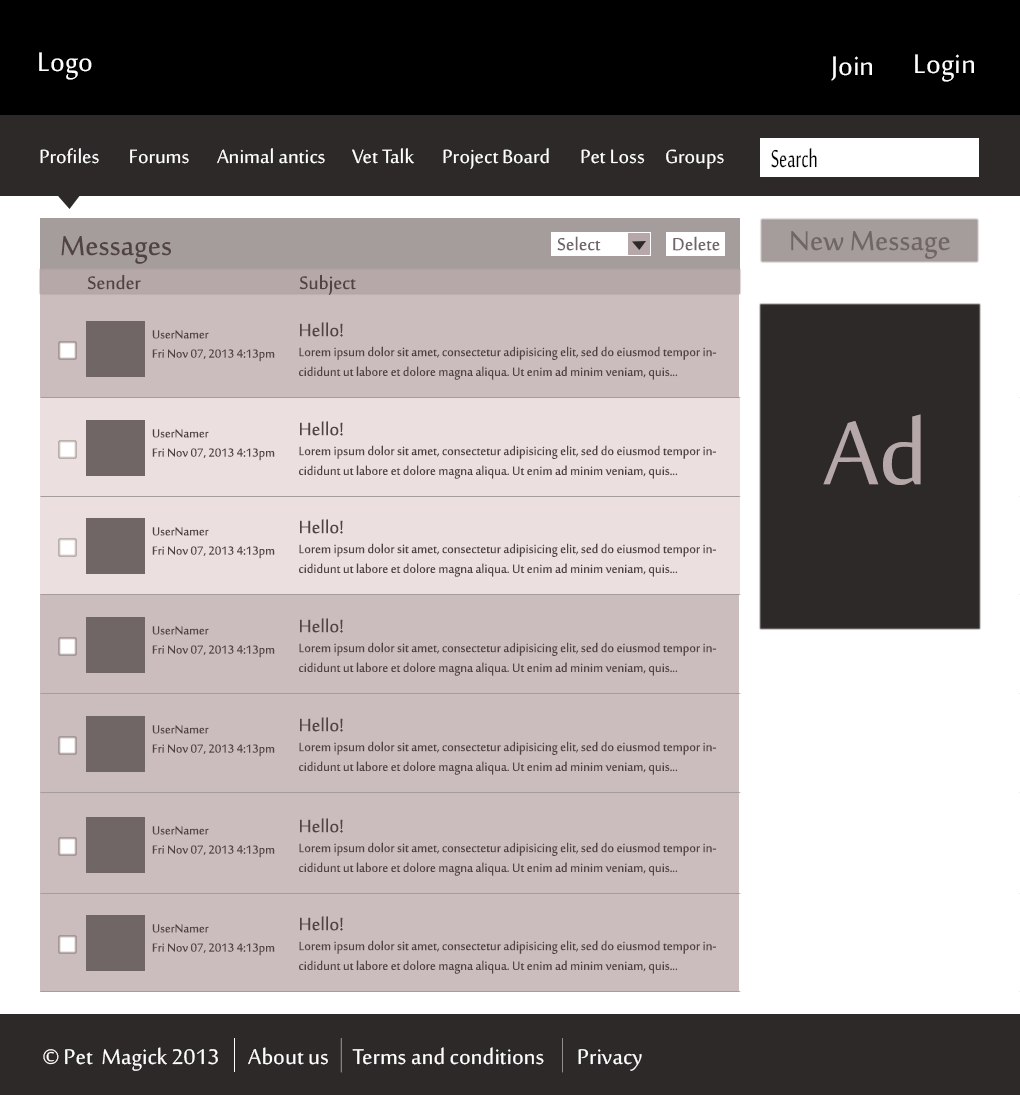
<style>
.page{position:relative;width:1020px;height:1095px;background:#cbbdbd}
.page>*{position:absolute;margin:0}
.t1{font:36.8px "SakkalMajalla";color:#ffffff}
.t2{font:26.2px "SakkalMajalla";color:#ffffff}
.t3{font:33.9px "SakkalMajalla";color:#000000;scale:0.67 1}
.t4{font:37.5px "SakkalMajalla";color:#706666}
.t5{font:37.5px "SakkalMajalla";color:#504342}
.t6{font:24px "SakkalMajalla";color:#706666}
.t7{font:25px "SakkalMajalla";color:#504342}
.t8{font:16.5px "SakkalMajalla";color:#504342}
.t9{font:24.5px "SakkalMajalla";color:#504342}
.t10{font:16px "SakkalMajalla";color:#504342}
.t11{font:123.2px "SakkalMajalla";color:#b6a8a8}
.t12{font:29.3px "SakkalMajalla";color:#ffffff}
</style>
<div class="page">
<p class="t1" style="left:39px;top:52px;width:53px;height:28px">Logo</p>
<p class="t1" style="left:915px;top:54px;width:59px;height:28px">Login</p>
<p class="t1" style="left:831px;top:56px;width:41px;height:25px">Join</p>
<p class="t2" style="left:40px;top:148px;width:59px;height:16px">Profiles</p>
<p class="t2" style="left:130px;top:149px;width:59px;height:15px">Forums</p>
<p class="t2" style="left:217px;top:148px;width:108px;height:16px">Animal antics</p>
<p class="t2" style="left:352px;top:148px;width:62px;height:16px">Vet Talk</p>
<p class="t2" style="left:443px;top:148px;width:106px;height:21px">Project Board</p>
<p class="t2" style="left:581px;top:149px;width:64px;height:15px">Pet Loss</p>
<p class="t2" style="left:666px;top:149px;width:58px;height:20px">Groups</p>
<p class="t3" style="left:771px;top:148px;width:46px;height:20px">Search</p>
<p class="t4" style="left:791px;top:231px;width:159px;height:28px">New Message</p>
<p class="t5" style="left:61px;top:236px;width:110px;height:28px">Messages</p>
<p class="t6" style="left:557px;top:236px;width:44px;height:15px">Select</p>
<p class="t6" style="left:673px;top:236px;width:47px;height:15px">Delete</p>
<p class="t7" style="left:87px;top:274px;width:54px;height:16px">Sender</p>
<p class="t7" style="left:299px;top:274px;width:57px;height:21px">Subject</p>
<p class="t8" style="left:299px;top:322px;width:417px;height:58px"><span class="t9">Hello!<br></span>Lorem ipsum dolor sit amet, consectetur adipisicing elit, sed do eiusmod tempor incididunt ut labore et dolore magna aliqua. Ut enim ad minim veniam, quis...</p>
<p class="t10" style="left:152px;top:330px;width:123px;height:32px">UserNamer<br>Fri Nov 07, 2013 4:13pm</p>
<p class="t11" style="left:823px;top:414px;width:98px;height:71px">Ad</p>
<p class="t8" style="left:299px;top:421px;width:417px;height:58px"><span class="t9">Hello!<br></span>Lorem ipsum dolor sit amet, consectetur adipisicing elit, sed do eiusmod tempor incididunt ut labore et dolore magna aliqua. Ut enim ad minim veniam, quis...</p>
<p class="t10" style="left:152px;top:429px;width:123px;height:32px">UserNamer<br>Fri Nov 07, 2013 4:13pm</p>
<p class="t8" style="left:299px;top:519px;width:417px;height:58px"><span class="t9">Hello!<br></span>Lorem ipsum dolor sit amet, consectetur adipisicing elit, sed do eiusmod tempor incididunt ut labore et dolore magna aliqua. Ut enim ad minim veniam, quis...</p>
<p class="t10" style="left:152px;top:527px;width:123px;height:32px">UserNamer<br>Fri Nov 07, 2013 4:13pm</p>
<p class="t10" style="left:152px;top:626px;width:123px;height:32px">UserNamer<br>Fri Nov 07, 2013 4:13pm</p>
<p class="t8" style="left:299px;top:618px;width:417px;height:58px"><span class="t9">Hello!<br></span>Lorem ipsum dolor sit amet, consectetur adipisicing elit, sed do eiusmod tempor incididunt ut labore et dolore magna aliqua. Ut enim ad minim veniam, quis...</p>
<p class="t10" style="left:152px;top:725px;width:123px;height:32px">UserNamer<br>Fri Nov 07, 2013 4:13pm</p>
<p class="t8" style="left:299px;top:717px;width:417px;height:58px"><span class="t9">Hello!<br></span>Lorem ipsum dolor sit amet, consectetur adipisicing elit, sed do eiusmod tempor incididunt ut labore et dolore magna aliqua. Ut enim ad minim veniam, quis...</p>
<p class="t8" style="left:299px;top:818px;width:417px;height:58px"><span class="t9">Hello!<br></span>Lorem ipsum dolor sit amet, consectetur adipisicing elit, sed do eiusmod tempor incididunt ut labore et dolore magna aliqua. Ut enim ad minim veniam, quis...</p>
<p class="t10" style="left:152px;top:826px;width:123px;height:32px">UserNamer<br>Fri Nov 07, 2013 4:13pm</p>
<p class="t8" style="left:299px;top:916px;width:417px;height:58px"><span class="t9">Hello!<br></span>Lorem ipsum dolor sit amet, consectetur adipisicing elit, sed do eiusmod tempor incididunt ut labore et dolore magna aliqua. Ut enim ad minim veniam, quis...</p>
<p class="t10" style="left:152px;top:924px;width:123px;height:32px">UserNamer<br>Fri Nov 07, 2013 4:13pm</p>
<p class="t12" style="left:43px;top:1047px;width:175px;height:24px">© Pet  Magick 2013</p>
<p class="t12" style="left:248px;top:1047px;width:80px;height:18px">About us</p>
<p class="t12" style="left:352px;top:1047px;width:192px;height:18px">Terms and conditions</p>
<p class="t12" style="left:578px;top:1049px;width:64px;height:22px">Privacy</p>
</div>
